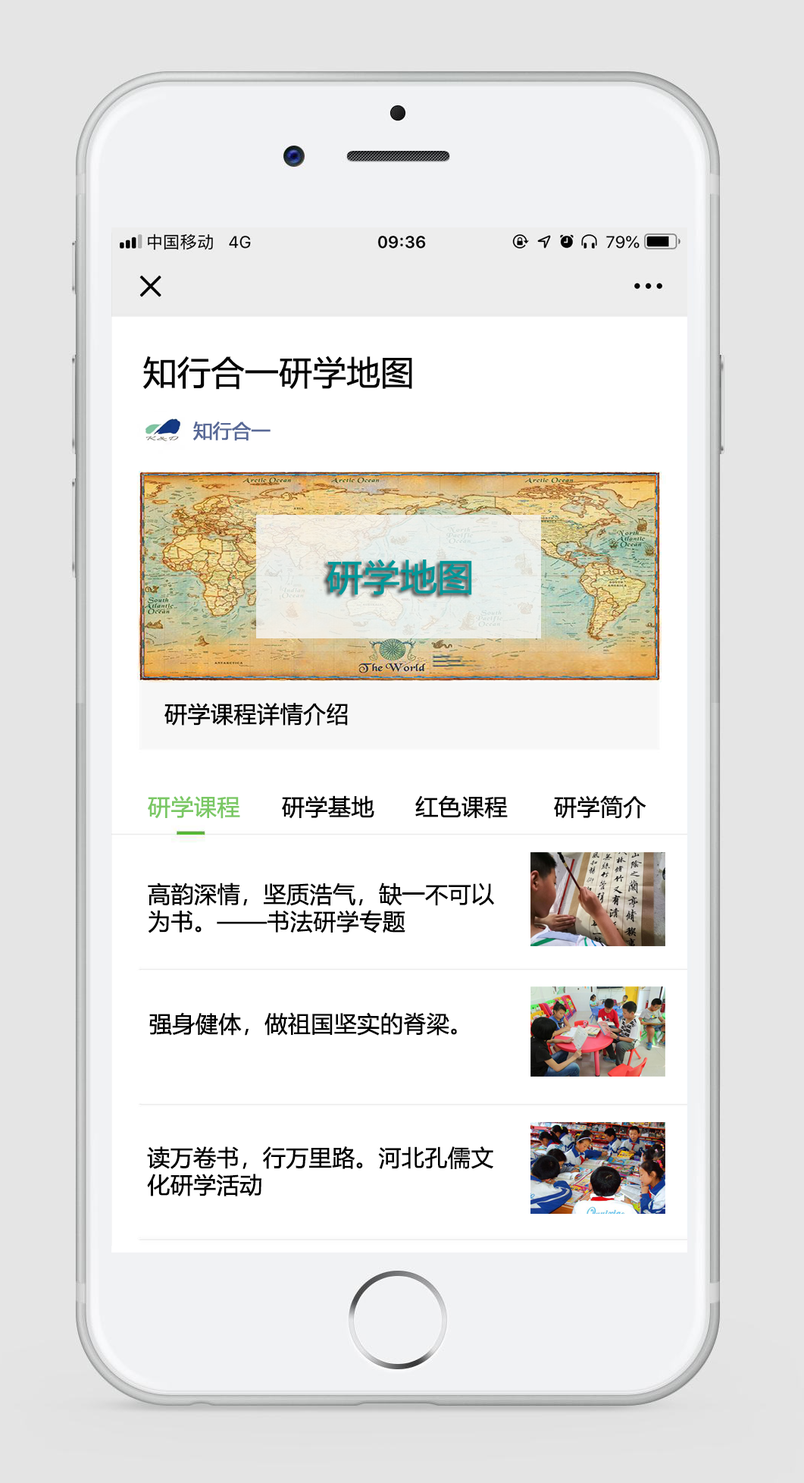
<style>
.page{position:relative;width:804px;height:1483px;background:#ffffff}
.page>*{position:absolute;margin:0}
.t1{font:33.4px "MicrosoftYaHei";letter-spacing:-0.01em;color:#040404;font-weight:bold}
.t2{font:19px "MicrosoftYaHei";letter-spacing:-0.01em;color:#586997;font-weight:bold}
.t3{font:36.4px "MicrosoftYaHei";letter-spacing:-0.01em;color:#009899;font-weight:bold}
.t4{font:22.7px "MicrosoftYaHei";letter-spacing:-0.01em;color:#000000;font-weight:bold}
.t5{font:22.7px "MicrosoftYaHei";letter-spacing:-0.01em;color:#7ac864;font-weight:bold}
</style>
<div class="page">
<p class="t1" style="left:143px;top:356px;width:269px;height:34px">知行合一研学地图</p>
<p class="t2" style="left:193px;top:421px;width:78px;height:19px">知行合一</p>
<p class="t3" style="left:327px;top:559px;width:145px;height:36px">研学地图</p>
<p class="t4" style="left:164px;top:703px;width:184px;height:23px">研学课程详情介绍</p>
<p class="t5" style="left:148px;top:795px;width:92px;height:24px">研学课程</p>
<p class="t4" style="left:282px;top:795px;width:92px;height:24px">研学基地</p>
<p class="t4" style="left:415px;top:795px;width:93px;height:24px">红色课程</p>
<p class="t4" style="left:554px;top:795px;width:93px;height:24px">研学简介</p>
<p class="t4" style="left:148px;top:882px;width:347px;height:51px">高韵深情，坚质浩气，缺一不可以<br>为书。——书法研学专题</p>
<p class="t4" style="left:149px;top:1012px;width:308px;height:23px">强身健体，做祖国坚实的脊梁。</p>
<p class="t4" style="left:147px;top:1146px;width:346px;height:50px">读万卷书，行万里路。河北孔儒文<br>化研学活动</p>
</div>
